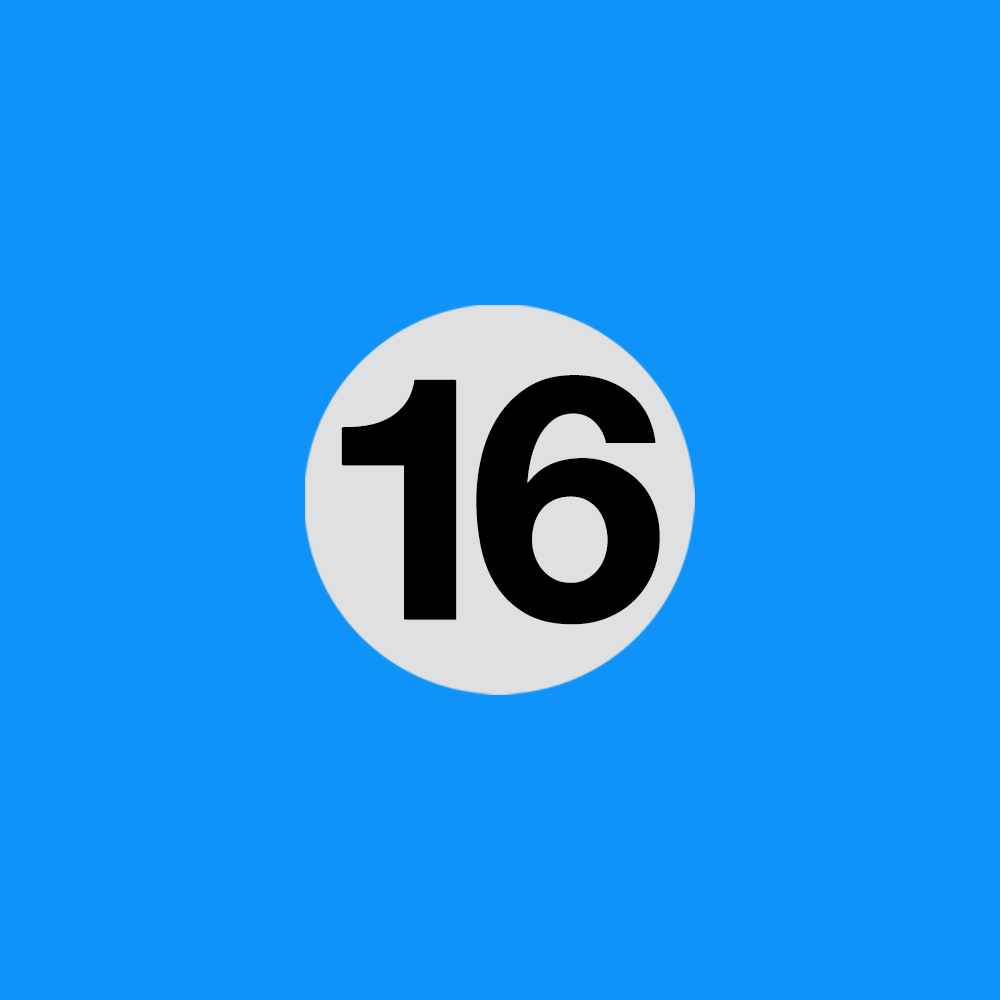
<style>
.page{position:relative;width:1000px;height:1000px;background:#0f93f9}
.page>*{position:absolute;margin:0}
.t1{font:340px "HelveticaNeue-Bold";letter-spacing:-0.15em;color:#000000;font-weight:bold;scale:1.04 1}
</style>
<div class="page">
<p class="t1" style="left:341px;top:375px;width:319px;height:250px">16</p>
</div>
